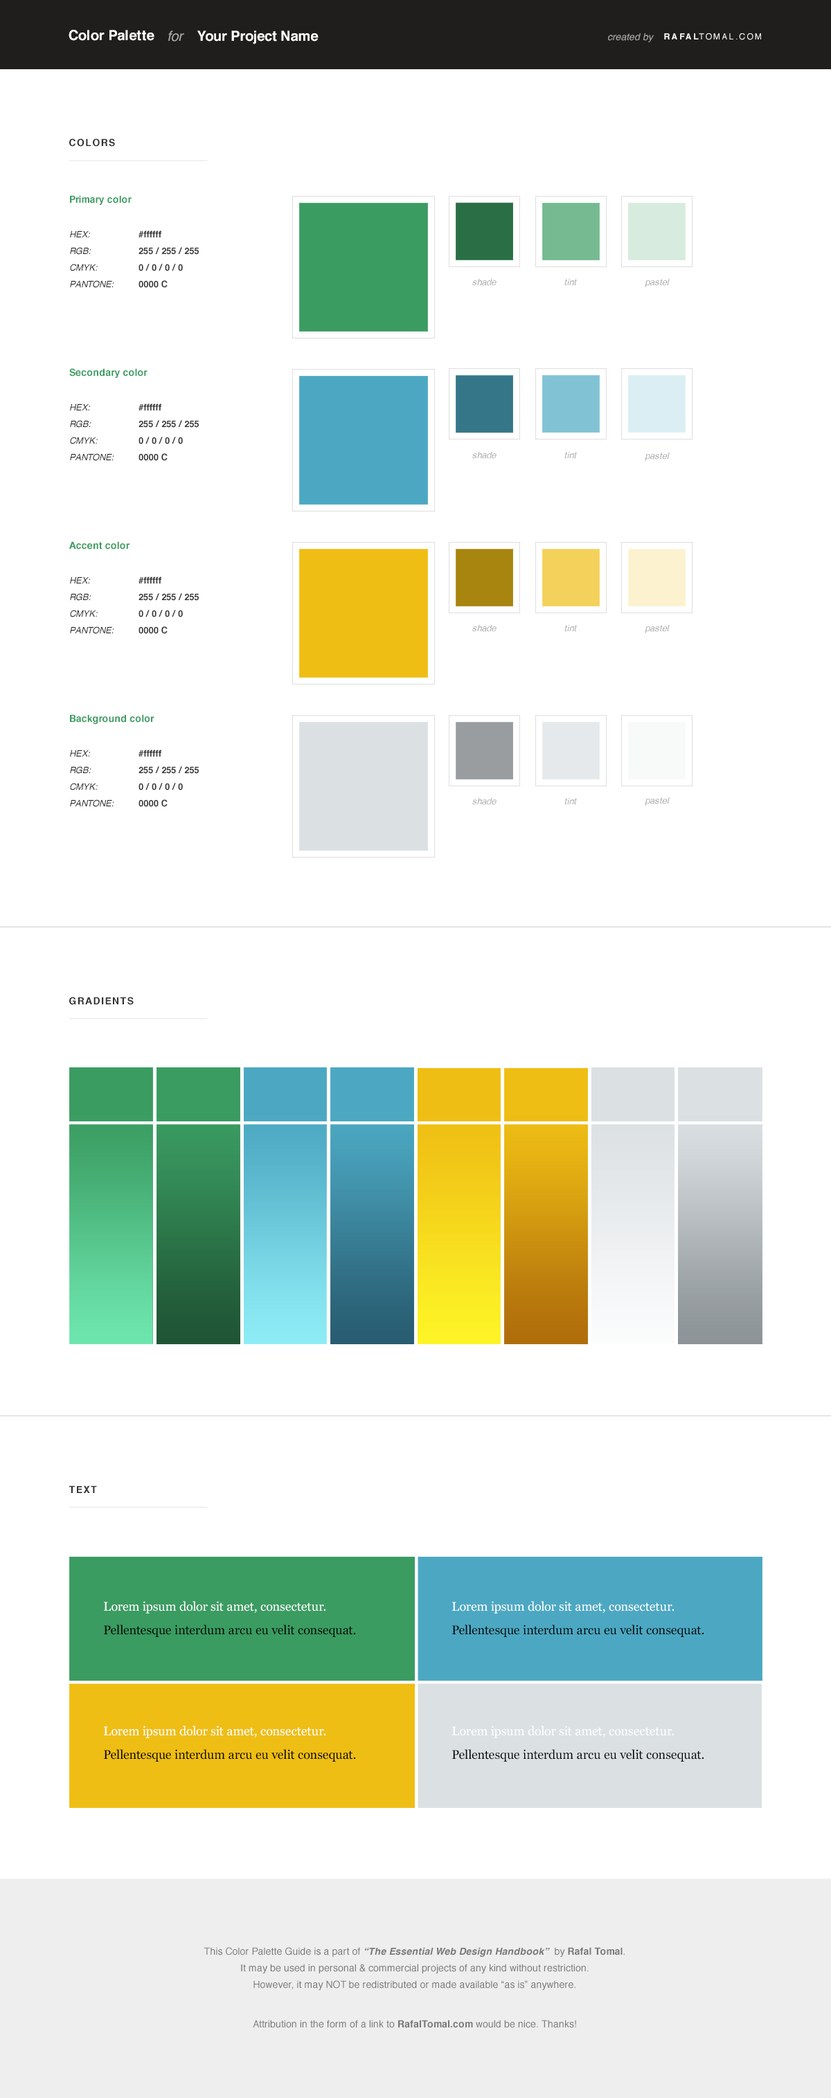
<style>
.page{position:relative;width:831px;height:2098px;background:#ffffff}
.page>*{position:absolute;margin:0}
.t1{font:13.8px "Helvetica-Bold";color:#ffffff}
.t2{font:13.8px "Helvetica-Oblique";color:#a9a9a8}
.t3{font:9.7px "Helvetica-Oblique";color:#a9a9a8}
.t4{font:8.3px "Helvetica";letter-spacing:0.2em;color:#ffffff;text-transform:uppercase}
.t5{font:8.3px "Helvetica-Bold";letter-spacing:0.2em;color:#ffffff;text-transform:uppercase}
.t6{font:9.7px "Helvetica-Bold";letter-spacing:0.1em;color:#333333;text-transform:uppercase}
.t7{font:9.7px "Helvetica-Bold";color:#3a9c61}
.t8{font:9px/13.8px "Helvetica-Oblique";color:#333333}
.t9{font:9px/13.8px "Helvetica-Bold";color:#333333}
.t10{font:9px "Helvetica-Oblique";color:#adadad}
.t11{font:12.5px/20.8px "Georgia";color:#000000}
.t12{font:12.5px/20.8px "Georgia";color:#ffffff}
.t13{font:9.7px/16.6px "Helvetica";color:#777777}
.t14{font:9.7px/16.6px "Helvetica-BoldOblique";color:#777777}
.t15{font:9.7px/16.6px "Helvetica-Bold";color:#777777}
</style>
<div class="page">
<p class="t1" style="left:69px;top:30px;width:85px;height:11px">Color Palette</p>
<p class="t2" style="left:168px;top:30px;width:16px;height:12px">for</p>
<p class="t1" style="left:197px;top:30px;width:121px;height:14px">Your Project Name</p>
<p class="t3" style="left:608px;top:33px;width:45px;height:9px">created by</p>
<p class="t4" style="left:664px;top:33px;width:97px;height:7px"><span class="t5">Rafal</span>Tomal.com</p>
<p class="t6" style="left:69px;top:138px;width:46px;height:9px">colors</p>
<p class="t7" style="left:70px;top:195px;width:62px;height:10px">Primary color</p>
<p class="t8" style="left:70px;top:231px;width:44px;height:57px">HEX:<br>RGB:<br>CMYK:<br>PANTONE:</p>
<p class="t9" style="left:138px;top:231px;width:61px;height:57px">#ffffff<br>255 / 255 / 255<br>0 / 0 / 0 / 0<br>0000 C</p>
<p class="t10" style="left:472px;top:278px;width:24px;height:8px">shade</p>
<p class="t10" style="left:564px;top:278px;width:13px;height:7px">tint</p>
<p class="t10" style="left:644px;top:278px;width:25px;height:9px">pastel</p>
<p class="t7" style="left:69px;top:368px;width:78px;height:10px">Secondary color</p>
<p class="t8" style="left:70px;top:404px;width:44px;height:57px">HEX:<br>RGB:<br>CMYK:<br>PANTONE:</p>
<p class="t9" style="left:138px;top:404px;width:61px;height:57px">#ffffff<br>255 / 255 / 255<br>0 / 0 / 0 / 0<br>0000 C</p>
<p class="t10" style="left:472px;top:451px;width:24px;height:8px">shade</p>
<p class="t10" style="left:564px;top:451px;width:13px;height:7px">tint</p>
<p class="t10" style="left:644px;top:452px;width:25px;height:9px">pastel</p>
<p class="t7" style="left:69px;top:541px;width:60px;height:9px">Accent color</p>
<p class="t8" style="left:70px;top:577px;width:44px;height:57px">HEX:<br>RGB:<br>CMYK:<br>PANTONE:</p>
<p class="t9" style="left:138px;top:577px;width:61px;height:57px">#ffffff<br>255 / 255 / 255<br>0 / 0 / 0 / 0<br>0000 C</p>
<p class="t10" style="left:472px;top:624px;width:24px;height:8px">shade</p>
<p class="t10" style="left:564px;top:624px;width:13px;height:7px">tint</p>
<p class="t10" style="left:644px;top:624px;width:25px;height:9px">pastel</p>
<p class="t7" style="left:70px;top:714px;width:84px;height:10px">Background color</p>
<p class="t8" style="left:70px;top:750px;width:44px;height:57px">HEX:<br>RGB:<br>CMYK:<br>PANTONE:</p>
<p class="t9" style="left:138px;top:750px;width:61px;height:57px">#ffffff<br>255 / 255 / 255<br>0 / 0 / 0 / 0<br>0000 C</p>
<p class="t10" style="left:472px;top:797px;width:24px;height:8px">shade</p>
<p class="t10" style="left:564px;top:797px;width:13px;height:7px">tint</p>
<p class="t10" style="left:644px;top:797px;width:25px;height:9px">pastel</p>
<p class="t6" style="left:69px;top:997px;width:65px;height:8px">Gradients</p>
<p class="t6" style="left:69px;top:1485px;width:28px;height:8px">Text</p>
<p class="t11" style="left:104px;top:1601px;width:252px;height:36px"><span class="t12">Lorem ipsum dolor sit amet, consectetur.<br></span>Pellentesque interdum arcu eu velit consequat.</p>
<p class="t11" style="left:452px;top:1601px;width:252px;height:36px"><span class="t12">Lorem ipsum dolor sit amet, consectetur.<br></span>Pellentesque interdum arcu eu velit consequat.</p>
<p class="t11" style="left:104px;top:1726px;width:252px;height:36px"><span class="t12">Lorem ipsum dolor sit amet, consectetur.<br></span>Pellentesque interdum arcu eu velit consequat.</p>
<p class="t11" style="left:452px;top:1726px;width:252px;height:36px"><span class="t12">Lorem ipsum dolor sit amet, consectetur.<br></span>Pellentesque interdum arcu eu velit consequat.</p>
<p class="t13" style="left:204px;top:1947px;width:420px;height:81px;text-align:center">This Color Palette Guide is a part of <span class="t14">“The Essential Web Design Handbook” </span> by <span class="t15">Rafal Tomal</span>.<br>It may be used in personal &amp; commercial projects of any kind without restriction.<br>However, it may NOT be redistributed or made available “as is” anywhere.<br><br>Attribution in the form of a link to <span class="t15">RafalTomal.com</span> would be nice. Thanks!</p>
</div>
